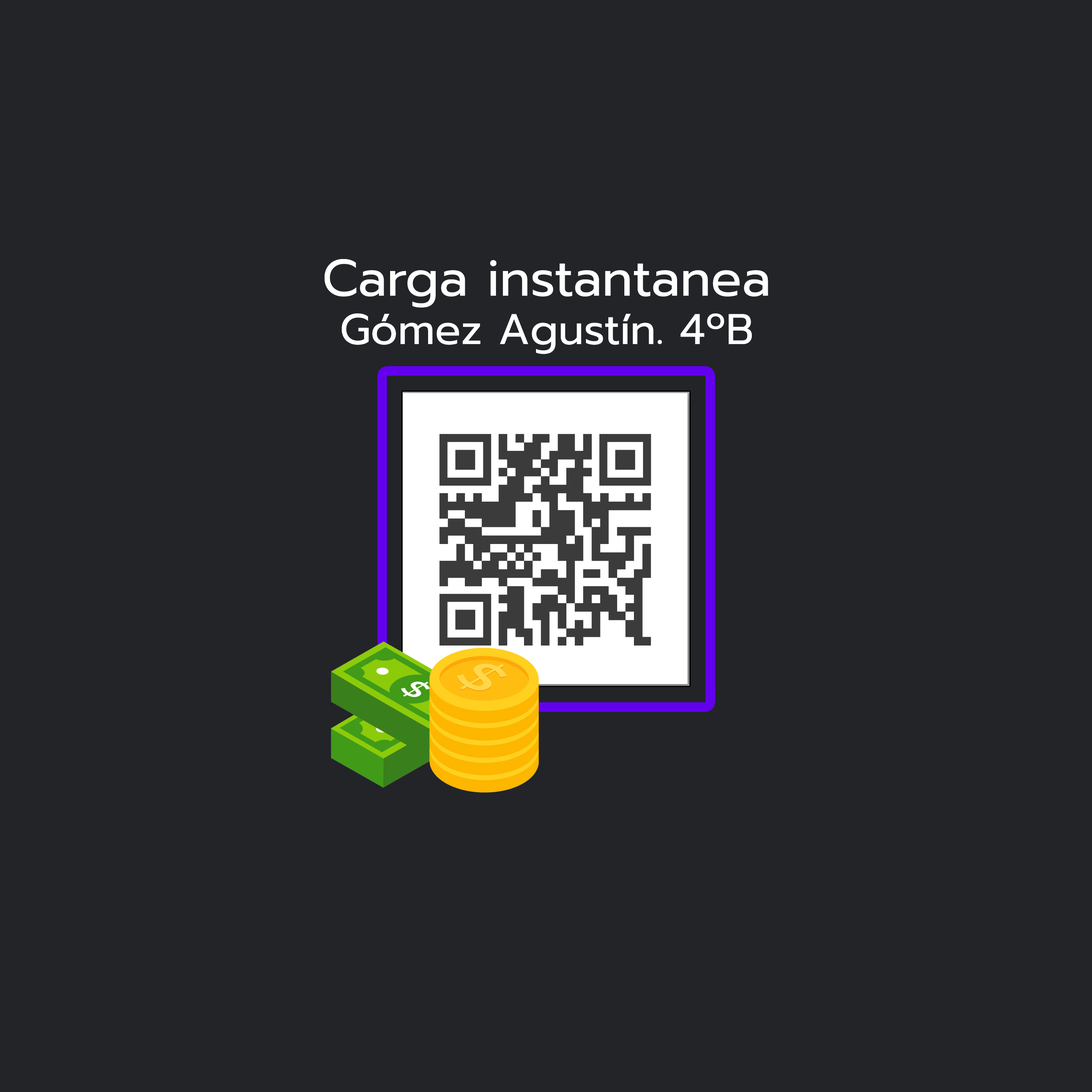
<style>
.page{position:relative;width:1092px;height:1092px;background:#222428}
.page>*{position:absolute;margin:0}
.t1{font:51.3px "Prompt-Regular";color:#ffffff}
.t2{font:42.8px "Prompt-Regular";color:#ffffff}
</style>
<div class="page">
<p class="t1" style="left:325px;top:259px;width:443px;height:49px">Carga instantanea</p>
<p class="t2" style="left:342px;top:313px;width:410px;height:41px">Gómez Agustín. 4ºB</p>
</div>
